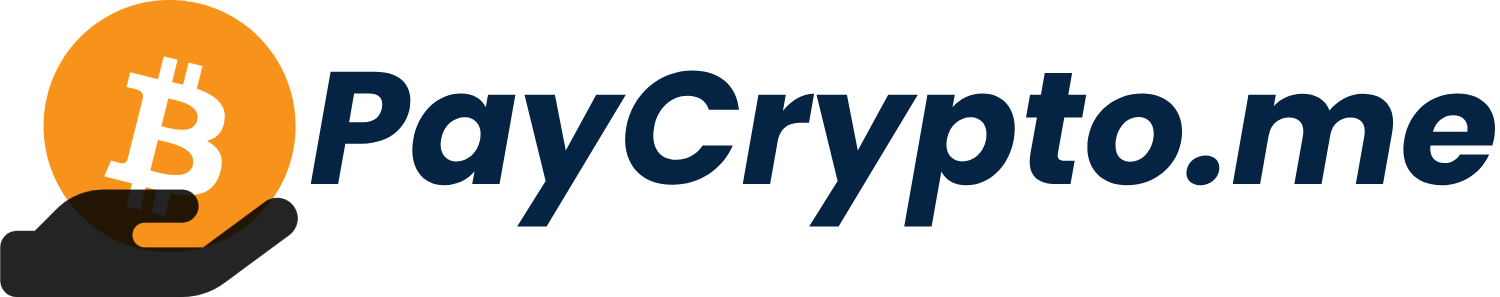
<style>
.page{position:relative;width:1500px;height:297px;background:#ffffff}
.page>*{position:absolute;margin:0}
.t1{font:160px "Poppins-BoldItalic";color:#052343}
</style>
<div class="page">
<p class="t1" style="left:310px;top:70px;width:1190px;height:157px">PayCrypto.me</p>
</div>
